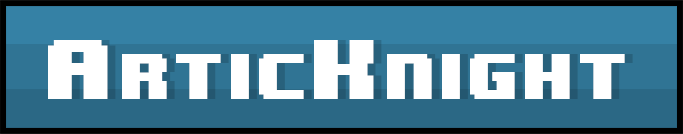
<style>
.page{position:relative;width:683px;height:134px;background:#3581a5}
.page>*{position:absolute;margin:0}
.t1{font:53.5px "8BITWONDERNominal";letter-spacing:0.025em;color:#ffffff}
.t2{font:71.3px "8BITWONDERNominal";letter-spacing:0.025em;color:#ffffff}
</style>
<div class="page">
<p class="t1" style="left:48px;top:40px;width:577px;height:59px"><span class="t2">A</span>rtic<span class="t2">k</span>night</p>
</div>
